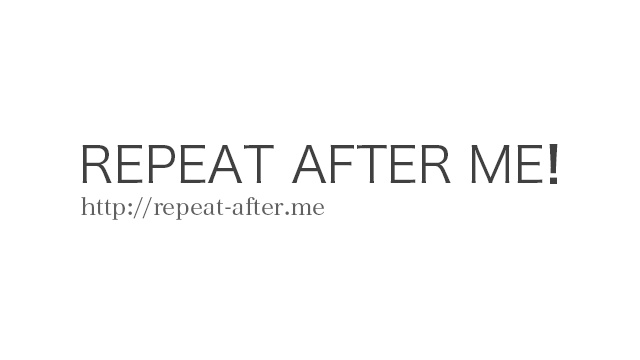
<style>
.page{position:relative;width:640px;height:360px;background:#ffffff}
.page>*{position:absolute;margin:0}
.t1{font:48px "HiraKakuProN-W3";color:#404040}
.t2{font:48px "HiraKakuProN-W6";color:#404040}
.t3{font:24px "HiraMinProN-W3";color:#606060}
</style>
<div class="page">
<p class="t1" style="left:82px;top:144px;width:476px;height:40px">REPEAT AFTER ME<span class="t2">!</span></p>
<p class="t3" style="left:81px;top:197px;width:243px;height:23px">http://repeat-after.me</p>
</div>
